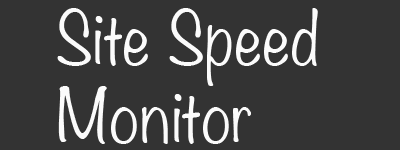
<style>
.page{position:relative;width:400px;height:150px;background:#333333}
.page>*{position:absolute;margin:0}
.t1{font:65px "Noteworthy-Light";letter-spacing:0.01em;color:#fbfbfb}
</style>
<div class="page">
<p class="t1" style="left:57px;top:8px;width:261px;height:136px">Site Speed<br>Monitor</p>
</div>
